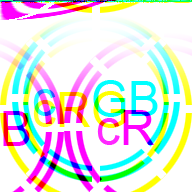
<style>
.page{position:relative;width:192px;height:192px;background:#ffffff}
.page>*{position:absolute;margin:0}
.t1{font:48px "ArialMT"}
</style>
<div class="page">
<p class="t1" style="left:33px;top:78px;width:125px;height:37px">cRGB</p>
</div>
